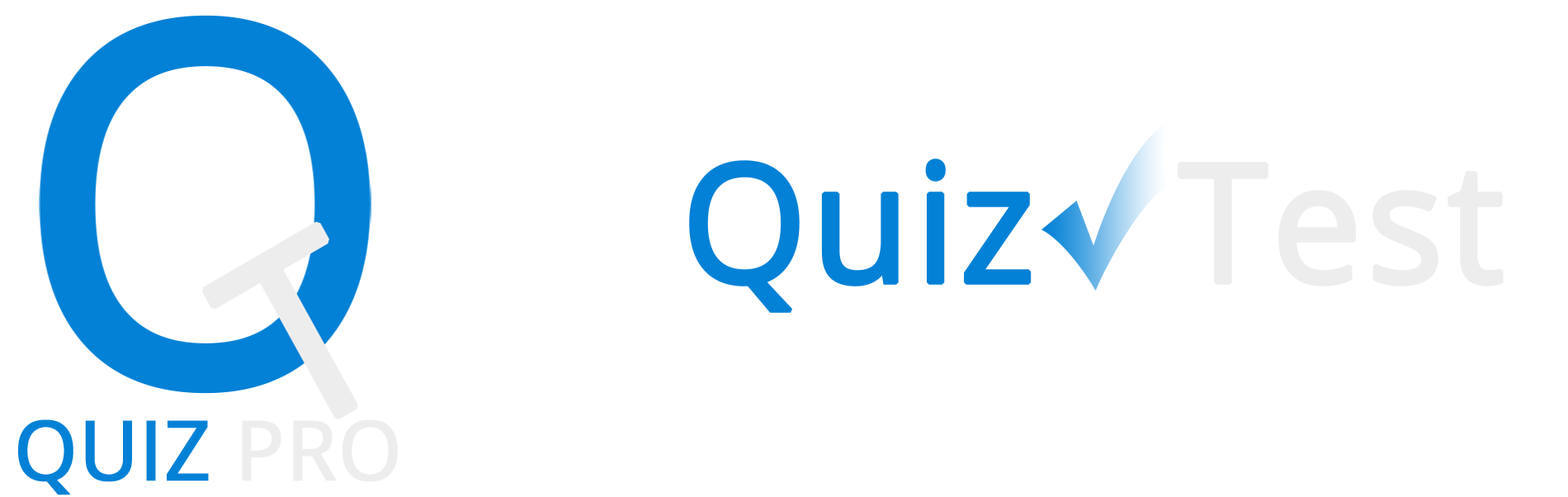
<style>
.page{position:relative;width:1568px;height:497px;background:#ffffff}
.page>*{position:absolute;margin:0}
.t1{font:165.1px "OpenSans";color:#0281d6;font-weight:bold}
.t2{font:165.1px "OpenSans";color:#ededed;font-weight:bold}
.t3{font:82.5px "OpenSans";color:#0281d6;font-weight:bold}
.t4{font:82.5px "OpenSans";color:#ededed;font-weight:bold}
</style>
<div class="page">
<p class="t1" style="left:689px;top:158px;width:815px;height:155px">Quiz   <span class="t2">Test</span></p>
<p class="t3" style="left:18px;top:419px;width:380px;height:76px">QUIZ <span class="t4">PRO</span></p>
</div>
